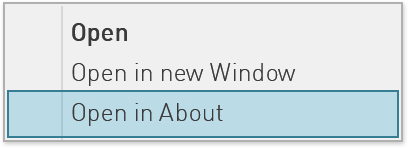
<style>
.page{position:relative;width:408px;height:148px;background:#f0f0f0}
.page>*{position:absolute;margin:0}
.t1{font:25px "DINAlternate-Medium";color:#3a3a3a}
.t2{font:25px "DINAlternate-Light";color:#3a3a3a}
</style>
<div class="page">
<p class="t1" style="left:72px;top:23px;width:55px;height:23px">Open</p>
<p class="t2" style="left:72px;top:63px;width:224px;height:23px">Open in new Window</p>
<p class="t2" style="left:72px;top:103px;width:151px;height:23px">Open in About</p>
</div>
